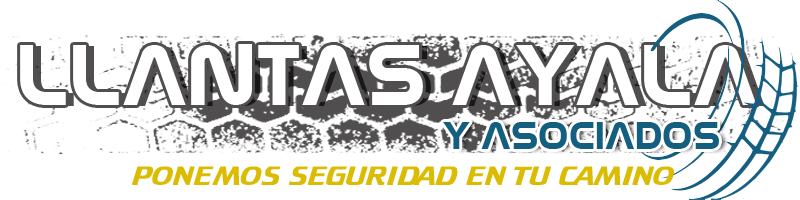
<style>
.page{position:relative;width:800px;height:200px;background:#ffffff}
.page>*{position:absolute;margin:0}
.t1{font:92.1px "Nasalization";color:#ffffff}
.t2{font:42.2px "Nasalization";color:#145e80}
.t3{font:23.3px "Crillee";color:#dcbb03;scale:1.26 1}
</style>
<div class="page">
<p class="t1" style="left:20px;top:44px;width:737px;height:61px">LLANTAS AYALA</p>
<p class="t2" style="left:443px;top:122px;width:276px;height:27px">Y ASOCIADOS</p>
<p class="t3" style="left:132px;top:166px;width:542px;height:19px">PONEMOS SEGURIDAD EN TU CAMINO</p>
</div>
